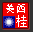
<style>
.page{position:relative;width:33px;height:32px;background:#f20000}
.page>*{position:absolute;margin:0}
.t1{font:10.4px "SimSun";color:#ffffff}
.t2{font:11.7px "SimSun";color:#ffffff}
</style>
<div class="page">
<p class="t1" style="left:6px;top:4px;width:19px;height:9px">美西</p>
<p class="t2" style="left:16px;top:15px;width:11px;height:12px">桂</p>
</div>
